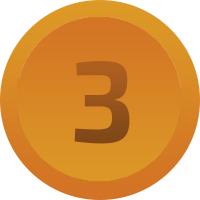
<style>
.page{position:relative;width:200px;height:200px;background:#ffffff}
.page>*{position:absolute;margin:0}
.t1{font:115px "Exo2-Bold"}
</style>
<div class="page">
<p class="t1" style="left:74px;top:61px;width:56px;height:83px">3</p>
</div>
